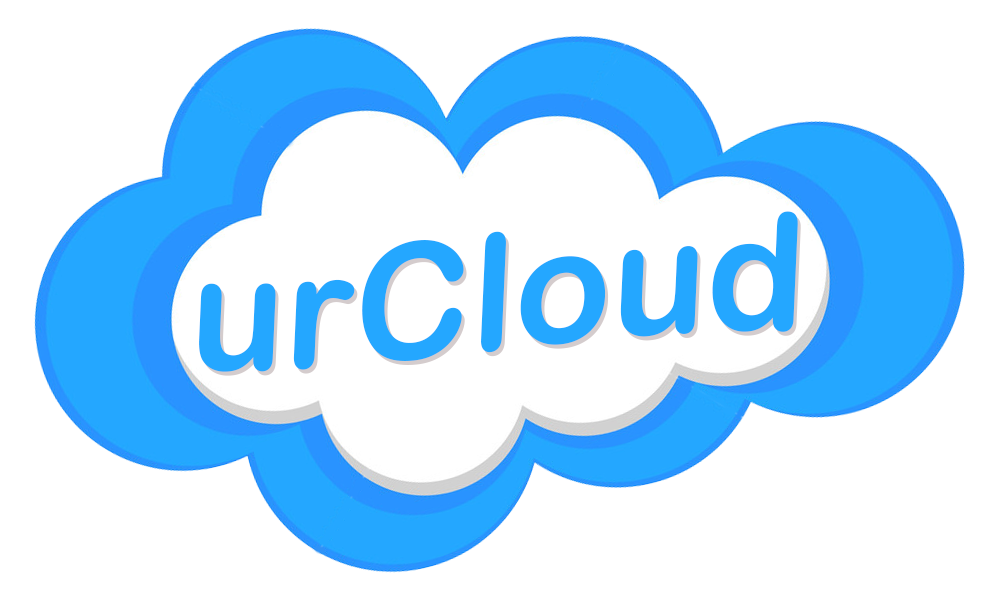
<style>
.page{position:relative;width:1000px;height:600px;background:#ffffff}
.page>*{position:absolute;margin:0}
.t1{font:162.6px "ArialRoundedMTBold";color:#24a7ff}
</style>
<div class="page">
<p class="t1" style="left:199px;top:211px;width:599px;height:161px;rotate:2deg">urCloud</p>
</div>
